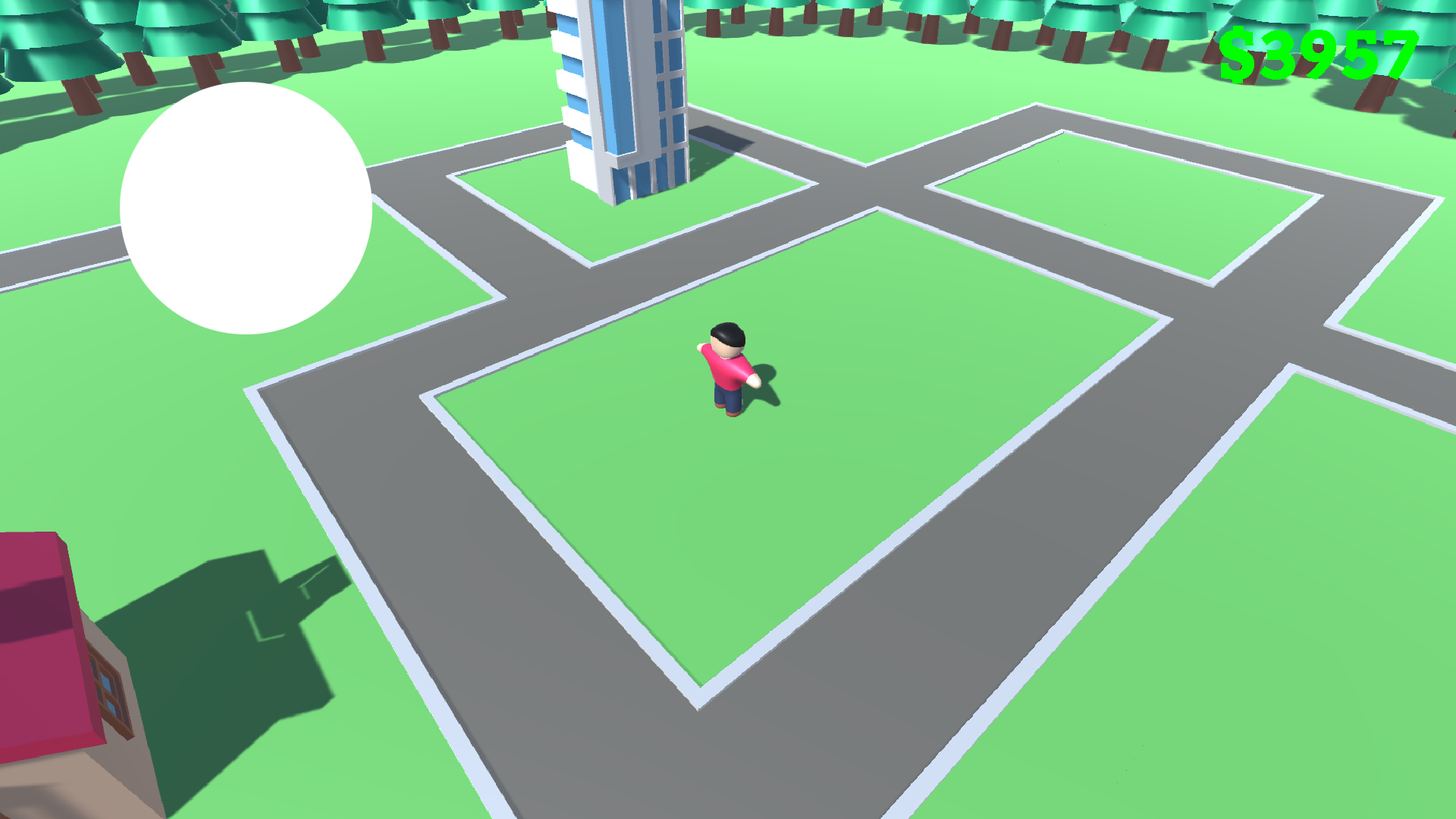
<style>
.page{position:relative;width:1456px;height:819px}
.page>*{position:absolute;margin:0}
.t1{font:66.7px "Commons";color:#00ff00}
</style>
<div class="page">
<p class="t1" style="left:1219px;top:26px;width:201px;height:57px">$3957</p>
</div>
